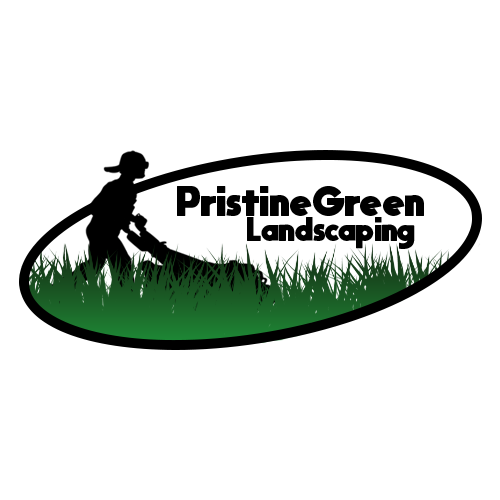
<style>
.page{position:relative;width:500px;height:500px;background:#ffffff}
.page>*{position:absolute;margin:0}
.t1{font:29.6px "moon_get-Heavy";letter-spacing:0.01em;color:#000000}
.t2{font:23px "moon_get-Heavy";letter-spacing:0.01em;color:#000000}
</style>
<div class="page">
<p class="t1" style="left:177px;top:186px;width:247px;height:30px">PristineGreen</p>
<p class="t2" style="left:247px;top:217px;width:168px;height:32px">Landscaping</p>
</div>
